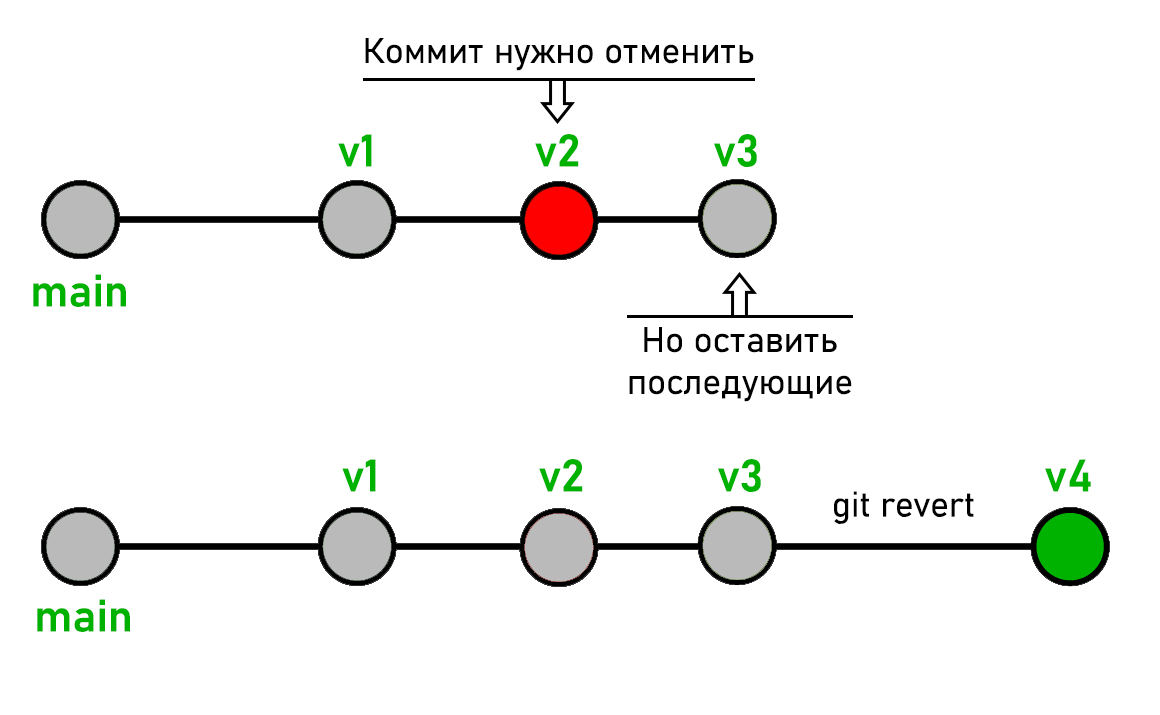
<style>
.page{position:relative;width:1160px;height:715px;background:#ffffff}
.page>*{position:absolute;margin:0}
.t1{font:35px "Bahnschrift-SemiLight";color:#000000}
.t2{font:45px "Bahnschrift-SemiBold";color:#00b200}
</style>
<div class="page">
<p class="t1" style="left:365px;top:38px;width:389px;height:33px">Коммит нужно отменить</p>
<p class="t2" style="left:338px;top:134px;width:34px;height:33px">v1</p>
<p class="t2" style="left:535px;top:134px;width:44px;height:33px">v2</p>
<p class="t2" style="left:714px;top:134px;width:43px;height:33px">v3</p>
<p class="t2" style="left:33px;top:274px;width:93px;height:33px">main</p>
<p class="t1" style="left:629px;top:327px;width:223px;height:75px;text-align:center">Но оставить<br>последующие</p>
<p class="t2" style="left:342px;top:459px;width:34px;height:33px">v1</p>
<p class="t2" style="left:539px;top:459px;width:44px;height:33px">v2</p>
<p class="t2" style="left:718px;top:459px;width:43px;height:33px">v3</p>
<p class="t2" style="left:1045px;top:459px;width:46px;height:33px">v4</p>
<p class="t1" style="left:834px;top:491px;width:140px;height:33px">git revert</p>
<p class="t2" style="left:37px;top:599px;width:93px;height:33px">main</p>
</div>
